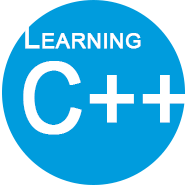
<style>
.page{position:relative;width:185px;height:185px;background:#009cdd}
.page>*{position:absolute;margin:0}
.t1{font:30.5px "ArialMT";color:#ffffff;font-variant:small-caps;font-weight:bold}
.t2{font:96.5px "ArialMT";color:#ffffff;font-variant:small-caps;font-weight:bold;scale:0.91 1}
</style>
<div class="page">
<p class="t1" style="left:25px;top:26px;width:116px;height:23px">Learning</p>
<p class="t2" style="left:23px;top:61px;width:164px;height:74px">C++</p>
</div>
